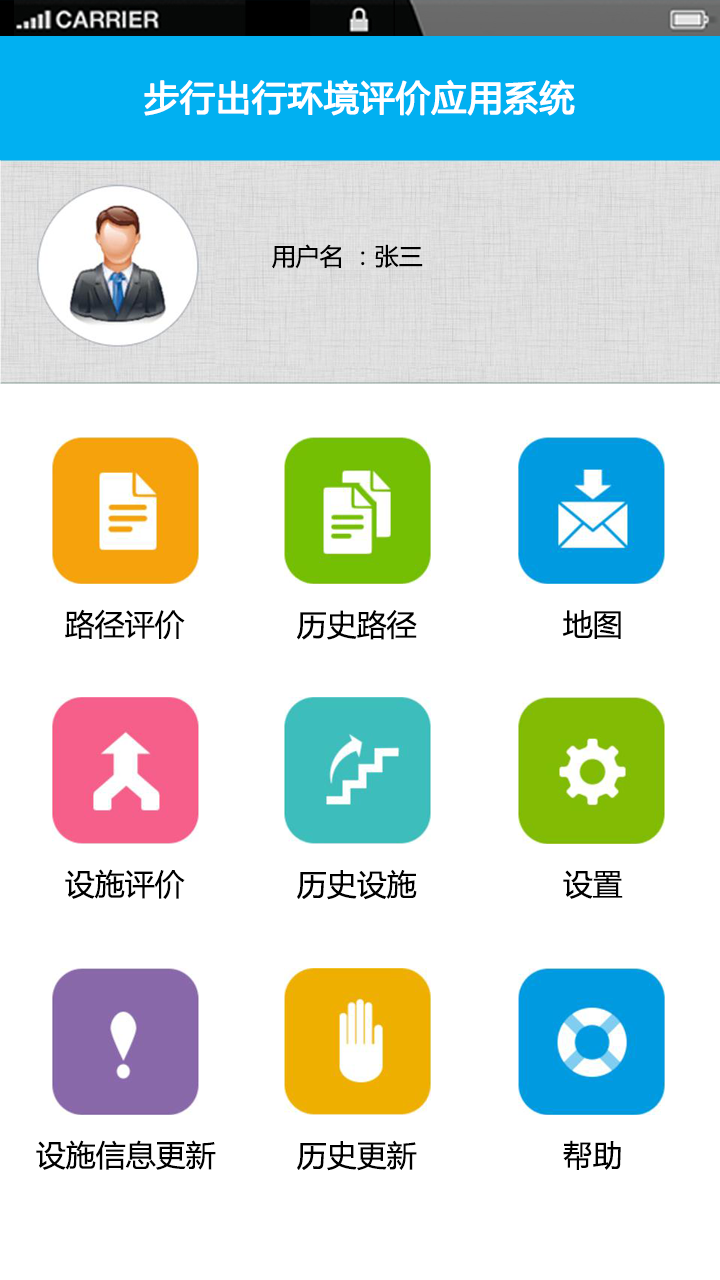
<style>
.page{position:relative;width:720px;height:1280px;background:#ffffff}
.page>*{position:absolute;margin:0}
.t1{font:35px "MicrosoftYaHei";color:#ffffff;font-weight:bold}
.t2{font:24px "MicrosoftYaHei";color:#000000}
.t3{font:30px "MicrosoftYaHei";color:#000000}
.t4{font:29.9px "MicrosoftYaHei";color:#000000}
</style>
<div class="page">
<p class="t1" style="left:144px;top:79px;width:431px;height:37px">步行出行环境评价应用系统</p>
<p class="t2" style="left:272px;top:244px;width:151px;height:25px">用户名 ：张三</p>
<p class="t3" style="left:65px;top:609px;width:120px;height:31px">路径评价</p>
<p class="t3" style="left:297px;top:610px;width:120px;height:30px">历史路径</p>
<p class="t3" style="left:562px;top:610px;width:59px;height:29px">地图</p>
<p class="t4" style="left:65px;top:869px;width:120px;height:30px">设施评价</p>
<p class="t3" style="left:297px;top:869px;width:120px;height:31px">历史设施</p>
<p class="t4" style="left:563px;top:870px;width:60px;height:29px">设置</p>
<p class="t4" style="left:36px;top:1140px;width:180px;height:30px">设施信息更新</p>
<p class="t3" style="left:297px;top:1140px;width:120px;height:31px">历史更新</p>
<p class="t4" style="left:563px;top:1140px;width:58px;height:30px">帮助</p>
</div>
